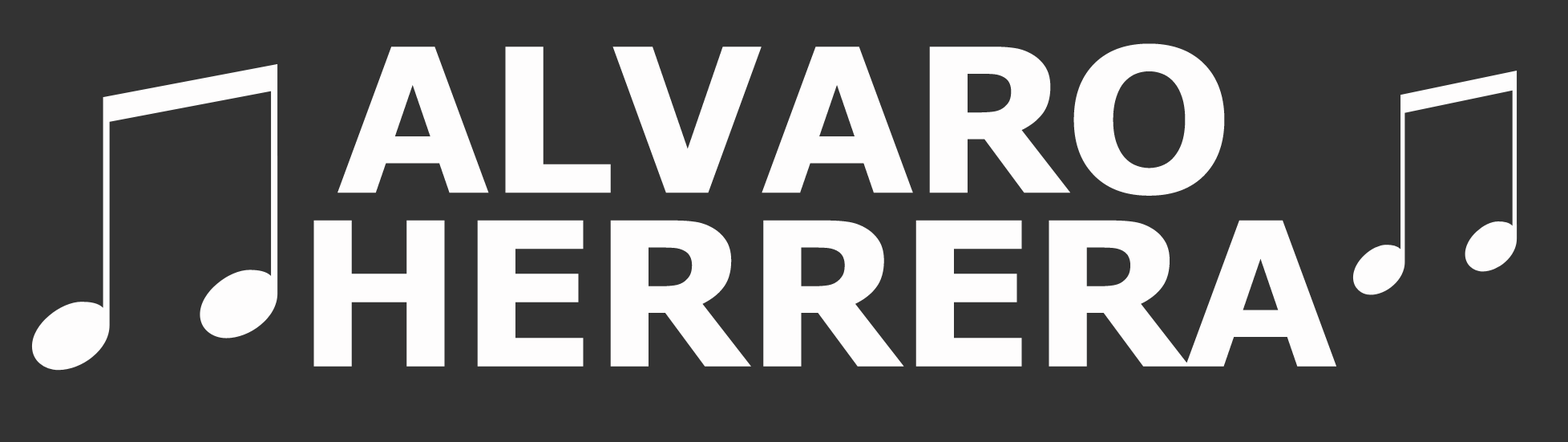
<style>
.page{position:relative;width:1568px;height:442px;background:#333333}
.page>*{position:absolute;margin:0}
.t1{font:200.4px/86.8px "Verdana-Bold";letter-spacing:-0.02em;color:#fefdfd;text-transform:uppercase}
</style>
<div class="page">
<p class="t1" style="left:313px;top:43px;width:1023px;height:323px;text-align:center">ALvaro<br><br> Herrera</p>
</div>
